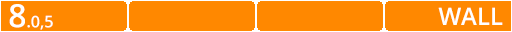
<style>
.page{position:relative;width:512px;height:32px;background:#ff8800}
.page>*{position:absolute;margin:0}
.t1{font:16px "OpenSans-SemiBold";color:#ffffff}
.t2{font:32px "OpenSans-SemiBold";color:#ffffff}
.t3{font:24px "OpenSans-SemiBold";color:#ffffff}
</style>
<div class="page">
<p class="t1" style="left:9px;top:4px;width:44px;height:26px"><span class="t2">8</span>.0,5</p>
<p class="t3" style="left:438px;top:7px;width:65px;height:18px">WALL</p>
</div>
